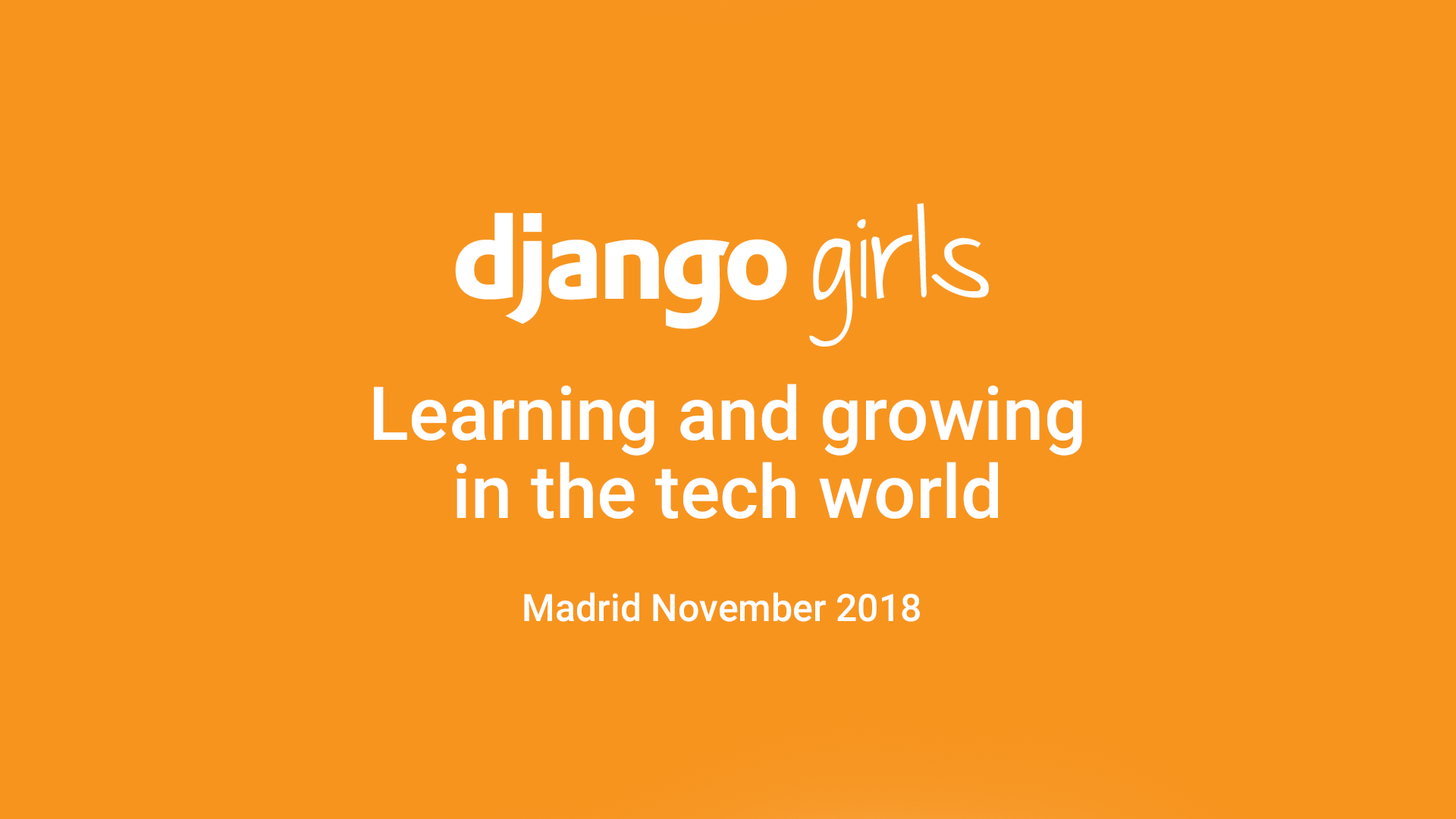
<style>
.page{position:relative;width:1456px;height:819px;background:#f7941e}
.page>*{position:absolute;margin:0}
.t1{font:74.3px/78.1px "Roboto-Medium";color:#ffffff}
.t2{font:37.9px "Roboto-Medium";color:#ffffff}
</style>
<div class="page">
<p class="t1" style="left:374px;top:384px;width:708px;height:135px;text-align:center">Learning and growing<br>in the tech world</p>
<p class="t2" style="left:524px;top:592px;width:396px;height:30px">Madrid November 2018</p>
</div>
